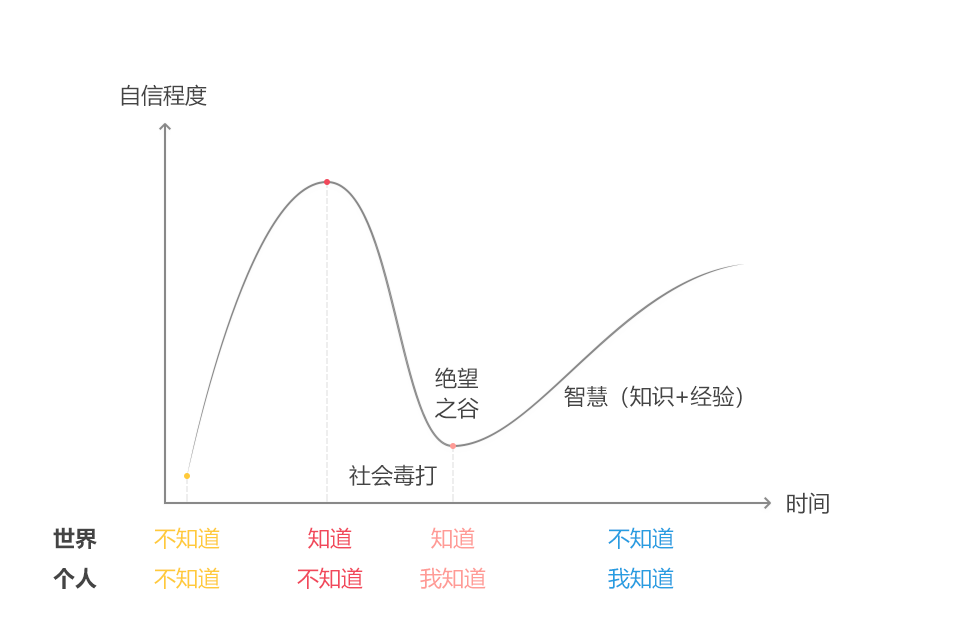
<style>
.page{position:relative;width:960px;height:640px;background:#ffffff}
.page>*{position:absolute;margin:0}
.t1{font:22px "MicrosoftYaHei";color:#444444}
.t2{font:22px/30px "MicrosoftYaHei";color:#444444}
.t3{font:22px "MicrosoftYaHei-Bold";color:#444444}
.t4{font:22px "MicrosoftYaHei";color:#ffca3a}
.t5{font:22px "MicrosoftYaHei";color:#f1485b}
.t6{font:22px "MicrosoftYaHei";color:#ff9b96}
.t7{font:22px "MicrosoftYaHei";color:#279de1}
</style>
<div class="page">
<p class="t1" style="left:121px;top:84px;width:86px;height:22px">自信程度</p>
<p class="t2" style="left:435px;top:367px;width:44px;height:52px">绝望<br>之谷</p>
<p class="t1" style="left:564px;top:385px;width:178px;height:23px">智慧（知识+经验）</p>
<p class="t1" style="left:349px;top:464px;width:88px;height:23px">社会毒打</p>
<p class="t1" style="left:787px;top:492px;width:42px;height:22px">时间</p>
<p class="t3" style="left:53px;top:527px;width:44px;height:22px">世界</p>
<p class="t4" style="left:154px;top:527px;width:66px;height:22px">不知道</p>
<p class="t5" style="left:308px;top:527px;width:44px;height:22px">知道</p>
<p class="t6" style="left:431px;top:527px;width:44px;height:22px">知道</p>
<p class="t7" style="left:608px;top:527px;width:66px;height:22px">不知道</p>
<p class="t3" style="left:53px;top:567px;width:44px;height:22px">个人</p>
<p class="t4" style="left:154px;top:567px;width:66px;height:22px">不知道</p>
<p class="t5" style="left:297px;top:567px;width:66px;height:22px">不知道</p>
<p class="t6" style="left:420px;top:567px;width:66px;height:22px">我知道</p>
<p class="t7" style="left:608px;top:567px;width:66px;height:22px">我知道</p>
</div>
